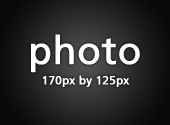
<style>
.page{position:relative;width:170px;height:125px}
.page>*{position:absolute;margin:0}
.t1{font:38.4px "FrutigerLT-Roman";color:#ffffff;font-weight:bold}
.t2{font:11.5px "FrutigerLT-Roman";color:#ffffff;font-weight:bold}
</style>
<div class="page">
<p class="t1" style="left:31px;top:34px;width:109px;height:39px">photo</p>
<p class="t2" style="left:42px;top:75px;width:88px;height:12px">170px by 125px</p>
</div>
